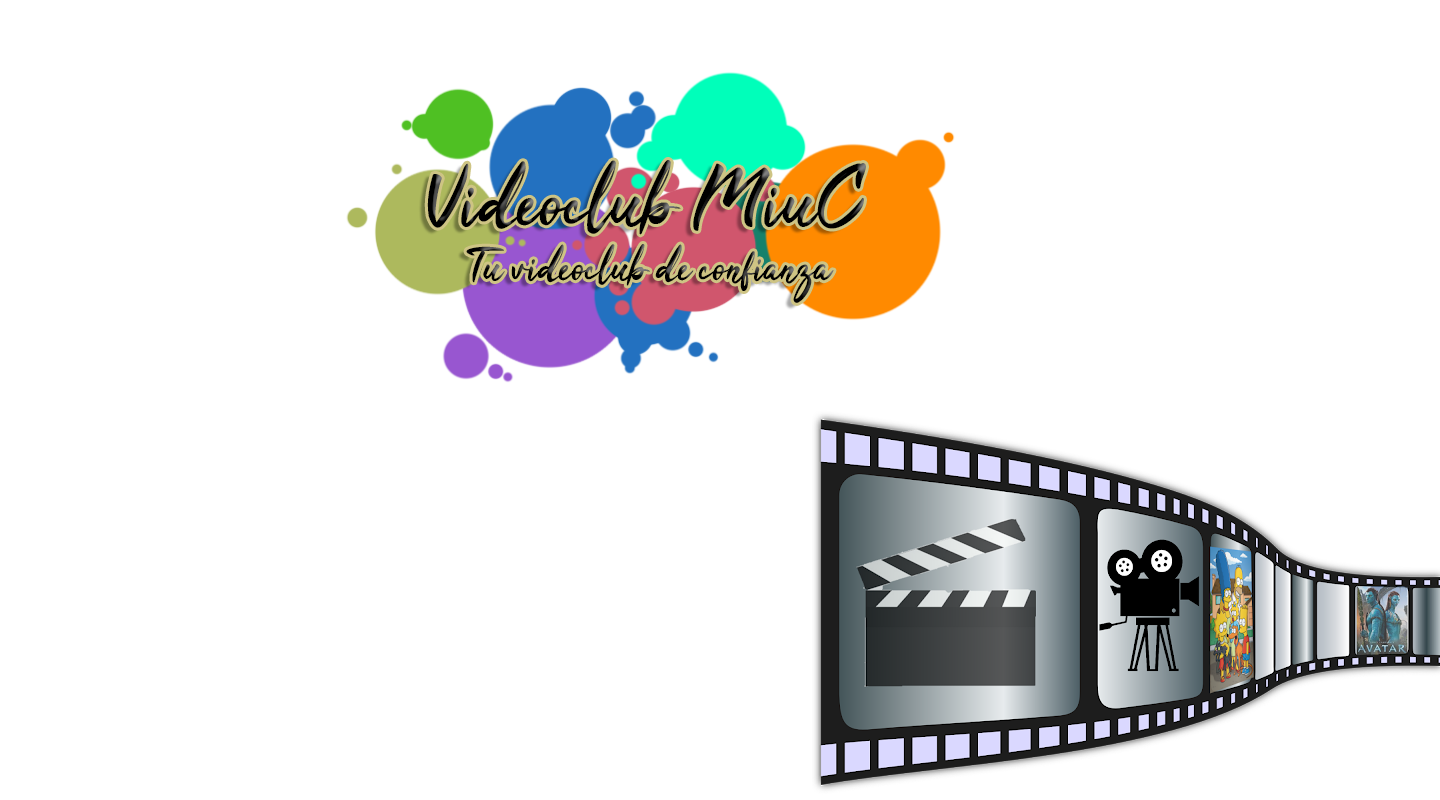
<style>
.page{position:relative;width:1440px;height:800px;background:#ffffff}
.page>*{position:absolute;margin:0}
.t1{font:46.5px "Tahu!";color:#000000}
.t2{font:83.7px "Tahu!";color:#000000}
</style>
<div class="page">
<p class="t1" style="left:427px;top:160px;width:439px;height:143px;text-align:center"><span class="t2">Videoclub MiuC<br></span>Tu videoclub de confianza</p>
</div>
